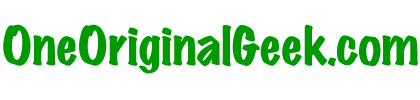
<style>
.page{position:relative;width:420px;height:100px;background:#ffffff}
.page>*{position:absolute;margin:0}
.t1{font:48px "MarkerFelt-Wide";color:#009900}
</style>
<div class="page">
<p class="t1" style="left:3px;top:24px;width:415px;height:50px">OneOriginalGeek.com</p>
</div>
